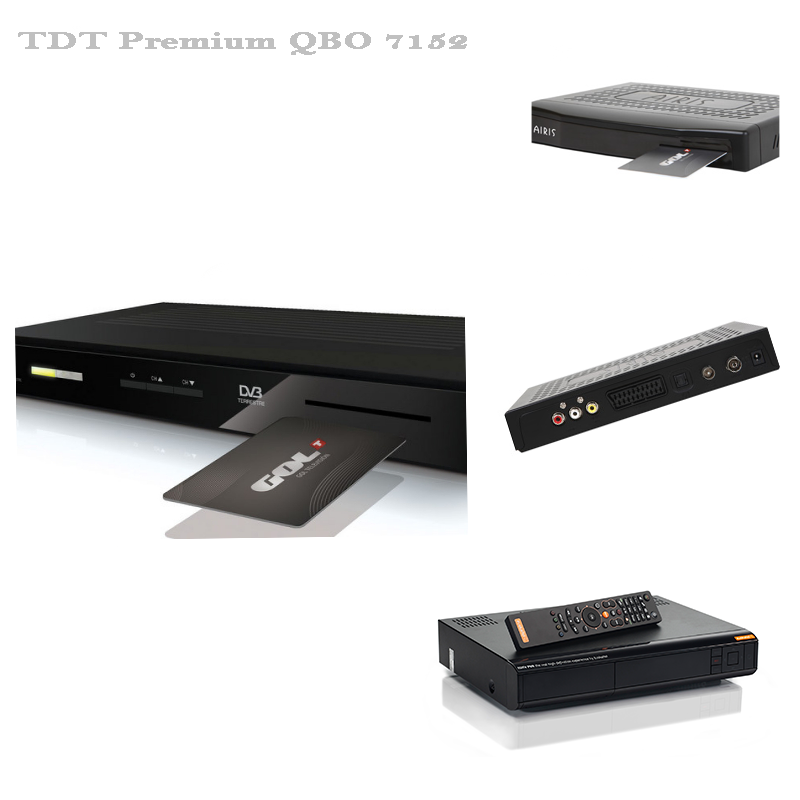
<style>
.page{position:relative;width:800px;height:800px;background:#ffffff}
.page>*{position:absolute;margin:0}
.t1{font:24px "BellMTBold";color:#c0c0c0;font-weight:bold;scale:1.57 1}
</style>
<div class="page">
<p class="t1" style="left:18px;top:32px;width:449px;height:23px">TDT Premium QBO 7152</p>
</div>
